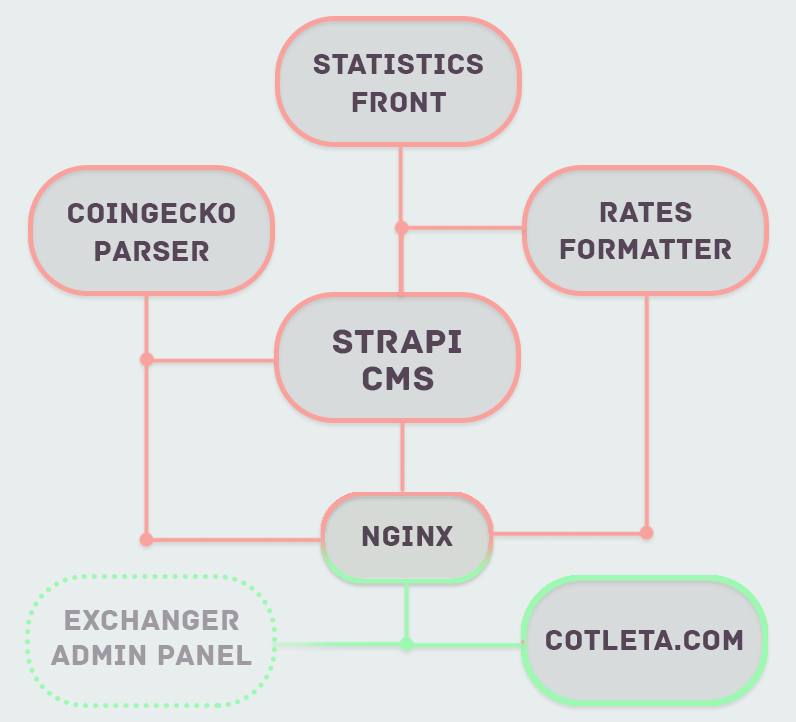
<style>
.page{position:relative;width:796px;height:722px;background:#e8eeed}
.page>*{position:absolute;margin:0}
.t1{font:30px/19px "Archive-Regular";letter-spacing:0.01em;color:#564557}
.t2{font:30px/37px "Archive-Regular";letter-spacing:0.01em;color:#564557}
.t3{font:30px/17px "Archive-Regular";letter-spacing:0.01em;color:#252b2a}
.t4{font:36px/37px "Archive-Regular";letter-spacing:0.01em;color:#564557}
.t5{font:36px/30px "Archive-Regular";letter-spacing:0.01em;color:#564557}
.t6{font:30px "Archive-Regular";letter-spacing:0.01em;color:#564557}
.t7{font:30px/35px "Archive-Regular";letter-spacing:0.01em;color:#9f99a2}
</style>
<div class="page">
<p class="t1" style="left:313px;top:54px;width:170px;height:58px;text-align:center">statistics<br><br>front</p>
<p class="t1" style="left:68px;top:203px;width:167px;height:58px;text-align:center">coingecko<br><br>parser</p>
<p class="t2" style="left:560px;top:202px;width:171px;height:57px;text-align:center"><span class="t3"><br></span>rates<br>formatter</p>
<p class="t4" style="left:333px;top:329px;width:128px;height:62px;text-align:center"><span class="t5"><br></span>strapi <br>cms</p>
<p class="t6" style="left:362px;top:526px;width:91px;height:20px">nginx</p>
<p class="t7" style="left:51px;top:610px;width:201px;height:55px;text-align:center">exchanger<br>admin panel</p>
<p class="t6" style="left:546px;top:630px;width:197px;height:20px">cotleta.com</p>
</div>
